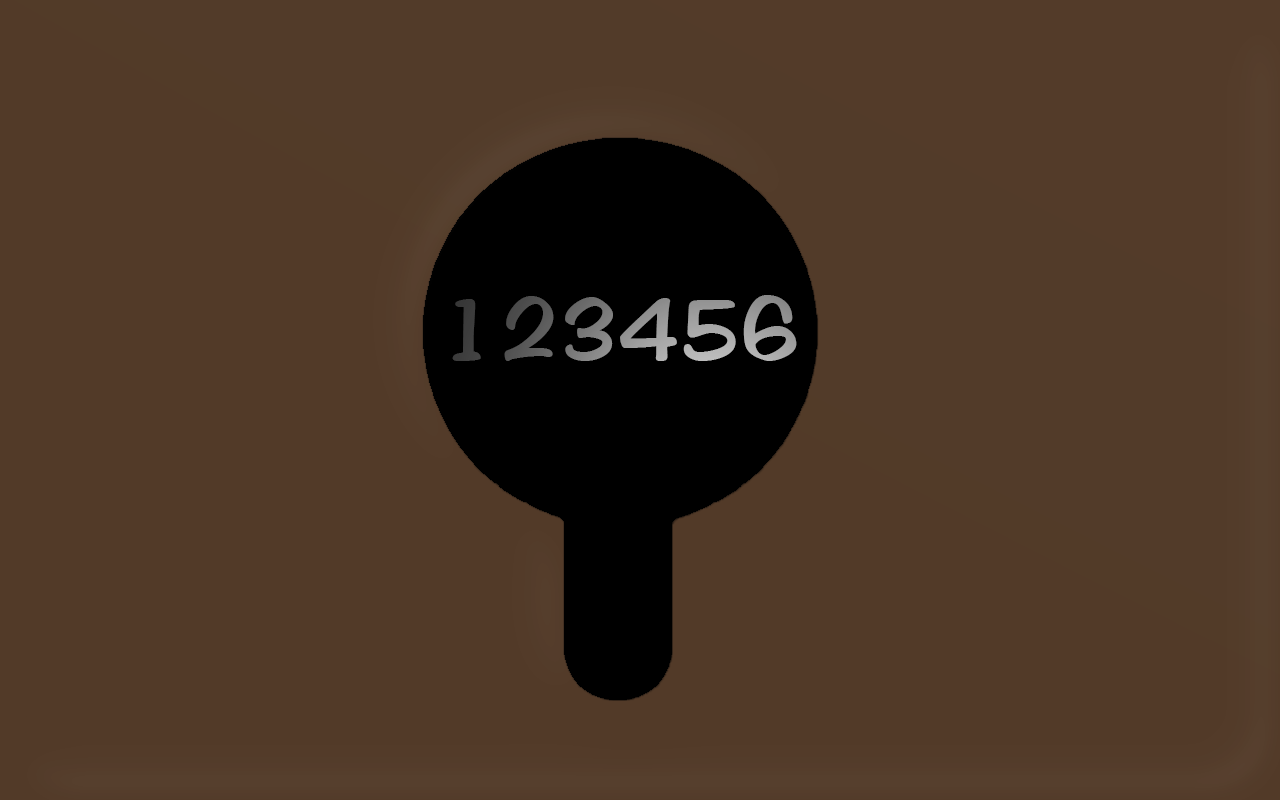
<style>
.page{position:relative;width:1280px;height:800px;background:#523a28}
.page>*{position:absolute;margin:0}
.t1{font:98.4px "Tabitha"}
</style>
<div class="page">
<p class="t1" style="left:452px;top:295px;width:345px;height:66px">123456</p>
</div>
